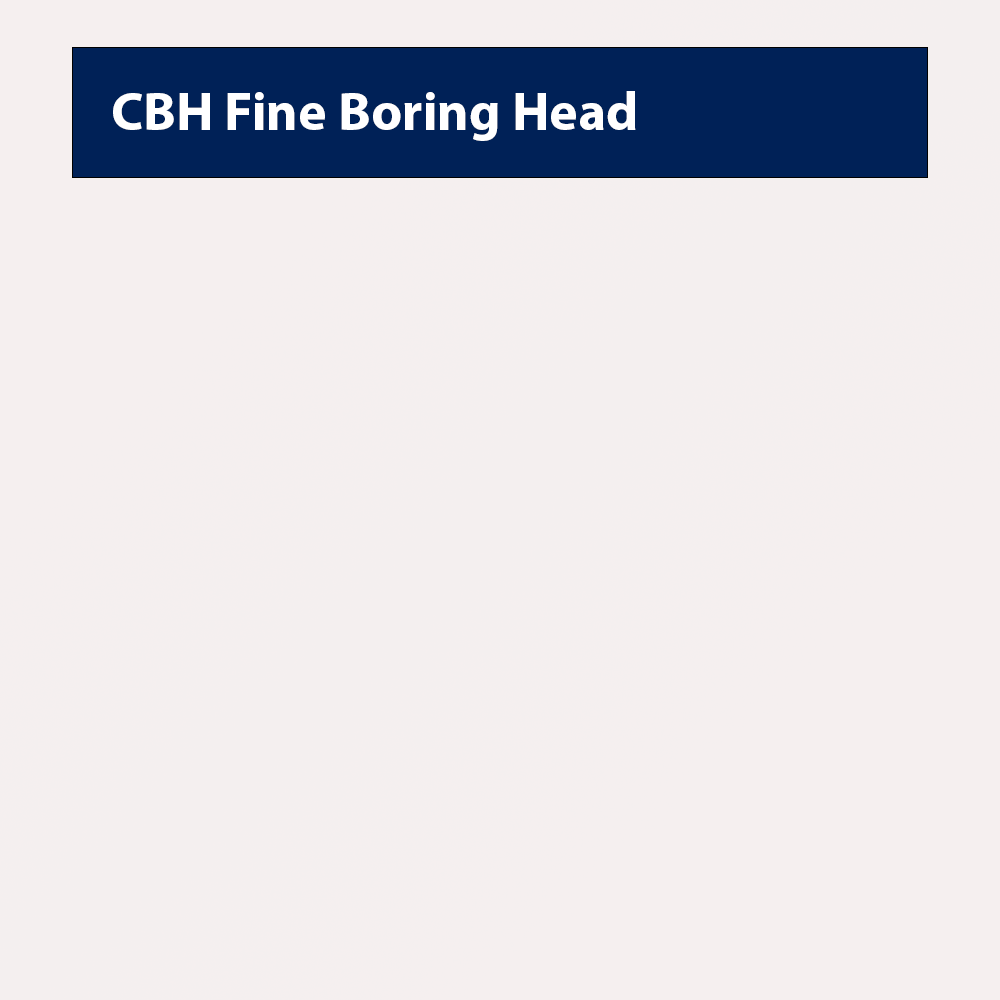
<style>
.page{position:relative;width:1000px;height:1000px;background:#f5efef}
.page>*{position:absolute;margin:0}
.t1{font:54.2px "MyriadPro-Bold";color:#ffffff}
</style>
<div class="page">
<p class="t1" style="left:113px;top:91px;width:523px;height:50px">CBH Fine Boring Head</p>
</div>
